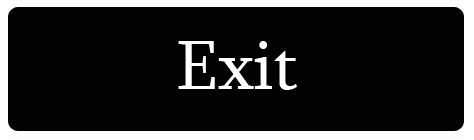
<style>
.page{position:relative;width:474px;height:140px;background:#030202}
.page>*{position:absolute;margin:0}
.t1{font:72px "Sylfaen";color:#ffffff}
</style>
<div class="page">
<p class="t1" style="left:178px;top:41px;width:119px;height:49px">Exit</p>
</div>
